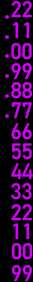
<style>
.page{position:relative;width:33px;height:282px;background:#000000}
.page>*{position:absolute;margin:0}
.t1{font:22px "Bahnschrift";color:#d700fe}
</style>
<div class="page">
<p class="t1" style="left:11px;top:1px;width:10px;height:17px">2</p>
<p class="t1" style="left:22px;top:1px;width:10px;height:17px">2</p>
<p class="t1" style="left:13px;top:22px;width:6px;height:17px">1</p>
<p class="t1" style="left:24px;top:22px;width:6px;height:17px">1</p>
<p class="t1" style="left:11px;top:43px;width:10px;height:17px">0</p>
<p class="t1" style="left:22px;top:43px;width:10px;height:17px">0</p>
<p class="t1" style="left:11px;top:63px;width:10px;height:17px">9</p>
<p class="t1" style="left:22px;top:63px;width:10px;height:17px">9</p>
<p class="t1" style="left:11px;top:82px;width:11px;height:17px">8</p>
<p class="t1" style="left:22px;top:82px;width:11px;height:17px">8</p>
<p class="t1" style="left:11px;top:102px;width:10px;height:17px">7</p>
<p class="t1" style="left:22px;top:102px;width:10px;height:17px">7</p>
<p class="t1" style="left:11px;top:123px;width:10px;height:17px">6</p>
<p class="t1" style="left:22px;top:123px;width:10px;height:17px">6</p>
<p class="t1" style="left:12px;top:143px;width:9px;height:17px">5</p>
<p class="t1" style="left:23px;top:143px;width:9px;height:17px">5</p>
<p class="t1" style="left:11px;top:163px;width:11px;height:17px">4</p>
<p class="t1" style="left:22px;top:163px;width:11px;height:17px">4</p>
<p class="t1" style="left:11px;top:183px;width:10px;height:17px">3</p>
<p class="t1" style="left:22px;top:183px;width:10px;height:17px">3</p>
<p class="t1" style="left:11px;top:204px;width:10px;height:17px">2</p>
<p class="t1" style="left:22px;top:204px;width:10px;height:17px">2</p>
<p class="t1" style="left:13px;top:223px;width:6px;height:17px">1</p>
<p class="t1" style="left:24px;top:223px;width:6px;height:17px">1</p>
<p class="t1" style="left:11px;top:243px;width:11px;height:17px">0</p>
<p class="t1" style="left:22px;top:243px;width:11px;height:17px">0</p>
<p class="t1" style="left:11px;top:265px;width:10px;height:17px">9</p>
<p class="t1" style="left:22px;top:265px;width:10px;height:17px">9</p>
</div>
